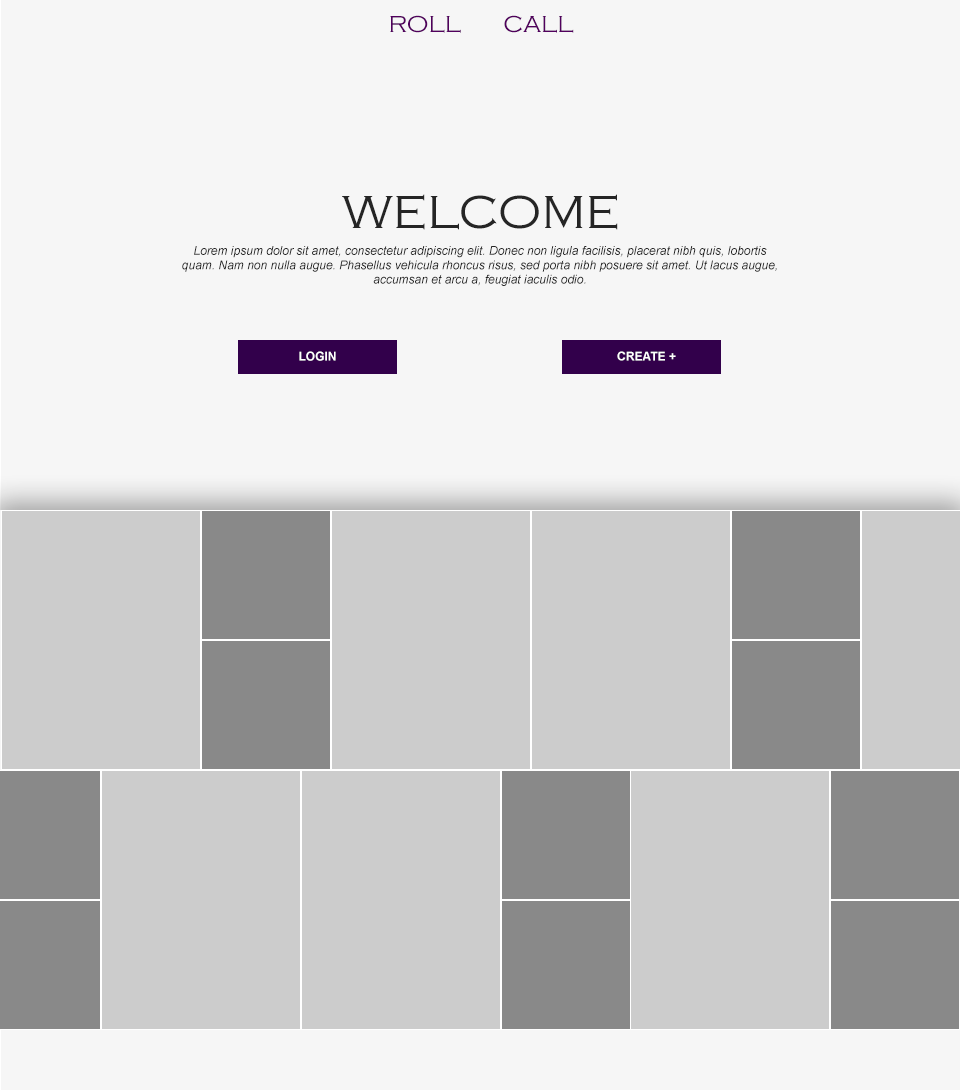
<style>
.page{position:relative;width:960px;height:1090px;background:#f6f6f6}
.page>*{position:absolute;margin:0}
.t1{font:24px "CopperplateGothic-Light";color:#51005d}
.t2{font:48px "CopperplateGothic-Light";color:#252525}
.t3{font:12px "Arial-ItalicMT";color:#252525}
.t4{font:12px "Arial-BoldMT";color:#ffffff}
</style>
<div class="page">
<p class="t1" style="left:390px;top:15px;width:184px;height:18px">ROLL       CALL</p>
<p class="t2" style="left:342px;top:194px;width:276px;height:36px">WELCOME</p>
<p class="t3" style="left:182px;top:246px;width:595px;height:40px;text-align:center">Lorem ipsum dolor sit amet, consectetur adipiscing elit. Donec non ligula facilisis, placerat nibh quis, lobortis quam. Nam non nulla augue. Phasellus vehicula rhoncus risus, sed porta nibh posuere sit amet. Ut lacus augue, accumsan et arcu a, feugiat iaculis odio.</p>
<p class="t4" style="left:299px;top:351px;width:37px;height:10px">LOGIN</p>
<p class="t4" style="left:617px;top:351px;width:59px;height:10px">CREATE +</p>
</div>
